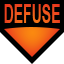
<style>
.page{position:relative;width:64px;height:64px;background:#000000}
.page>*{position:absolute;margin:0}
.t1{font:26.2px "ArialNarrow-Bold";letter-spacing:0.01em;color:#ec4e1d;scale:0.64 1}
</style>
<div class="page">
<p class="t1" style="left:4px;top:4px;width:56px;height:19px">DEFUSE</p>
</div>
